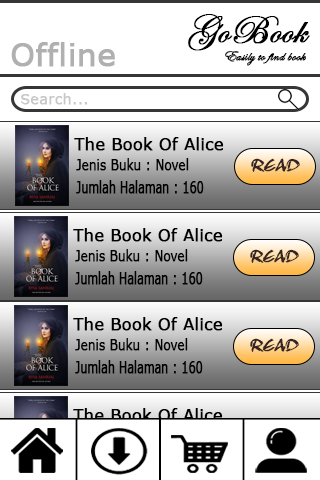
<style>
.page{position:relative;width:320px;height:480px;background:#ffffff}
.page>*{position:absolute;margin:0}
.t1{font:40px "EdwardianScriptITC";color:#000000;font-weight:bold}
.t2{font:30.6px "Verdana";color:#afafaf;font-weight:bold}
.t3{font:14.3px "EdwardianScriptITC";color:#000000;font-weight:bold}
.t4{font:14.3px "Verdana";color:#c8c8c8;font-weight:bold}
.t5{font:16px "Verdana";color:#000000;font-weight:bold}
.t6{font:15.4px "Verdana";color:#000000;font-weight:bold;scale:0.75 1}
.t7{font:18.6px "RuachLetPlain";color:#342424;font-weight:bold}
.t8{font:16.4px "Verdana";color:#000000;font-weight:bold;scale:0.65 1}
</style>
<div class="page">
<p class="t1" style="left:188px;top:14px;width:122px;height:37px">GoBook</p>
<p class="t2" style="left:11px;top:42px;width:104px;height:25px">Offline</p>
<p class="t3" style="left:225px;top:51px;width:81px;height:15px">Easily to find book</p>
<p class="t4" style="left:21px;top:93px;width:67px;height:12px">Search...</p>
<p class="t5" style="left:74px;top:137px;width:150px;height:14px">The Book Of Alice</p>
<p class="t6" style="left:76px;top:158px;width:113px;height:13px">Jenis Buku : Novel</p>
<p class="t7" style="left:251px;top:158px;width:49px;height:14px">READ</p>
<p class="t8" style="left:76px;top:180px;width:128px;height:14px">Jumlah Halaman : 160</p>
<p class="t5" style="left:73px;top:228px;width:150px;height:14px">The Book Of Alice</p>
<p class="t6" style="left:75px;top:249px;width:113px;height:13px">Jenis Buku : Novel</p>
<p class="t7" style="left:250px;top:249px;width:49px;height:14px">READ</p>
<p class="t8" style="left:75px;top:271px;width:128px;height:14px">Jumlah Halaman : 160</p>
<p class="t5" style="left:73px;top:317px;width:150px;height:14px">The Book Of Alice</p>
<p class="t6" style="left:75px;top:338px;width:113px;height:13px">Jenis Buku : Novel</p>
<p class="t7" style="left:250px;top:338px;width:49px;height:14px">READ</p>
<p class="t8" style="left:75px;top:360px;width:128px;height:14px">Jumlah Halaman : 160</p>
<p class="t5" style="left:73px;top:408px;width:150px;height:14px">The Book Of Alice</p>
</div>
